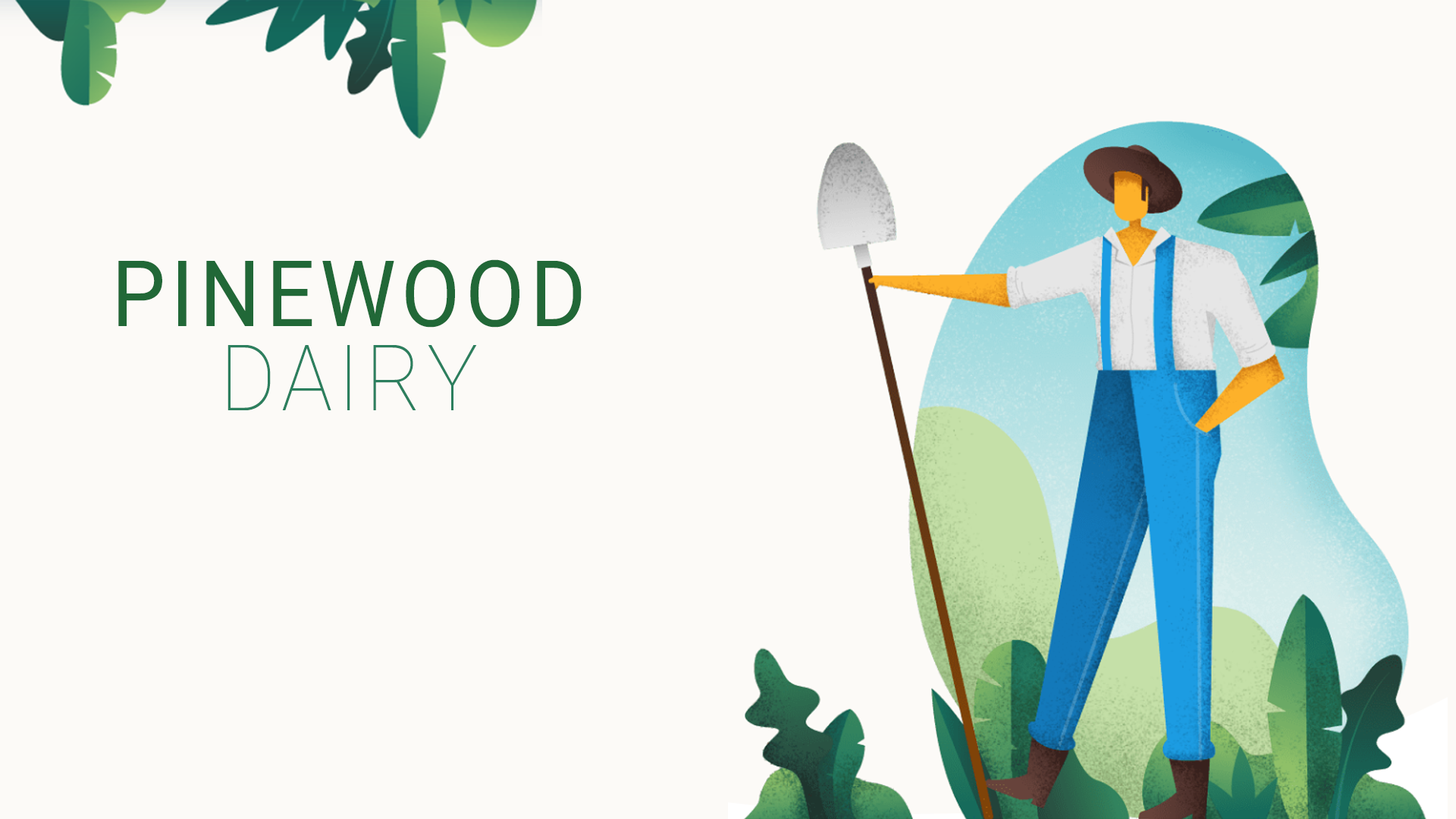
<style>
.page{position:relative;width:1456px;height:819px;background:#fcfaf7}
.page>*{position:absolute;margin:0}
.t1{font:91.7px "Roboto-Regular";letter-spacing:0.065em;color:#216837;scale:0.93 1}
.t2{font:91.7px "Roboto-Thin";letter-spacing:0.065em;color:#2c7f5e;scale:0.93 1}
</style>
<div class="page">
<p class="t1" style="left:118px;top:259px;width:464px;height:151px;text-align:center">PINEWOOD<br><span class="t2">DAIRY</span></p>
</div>
